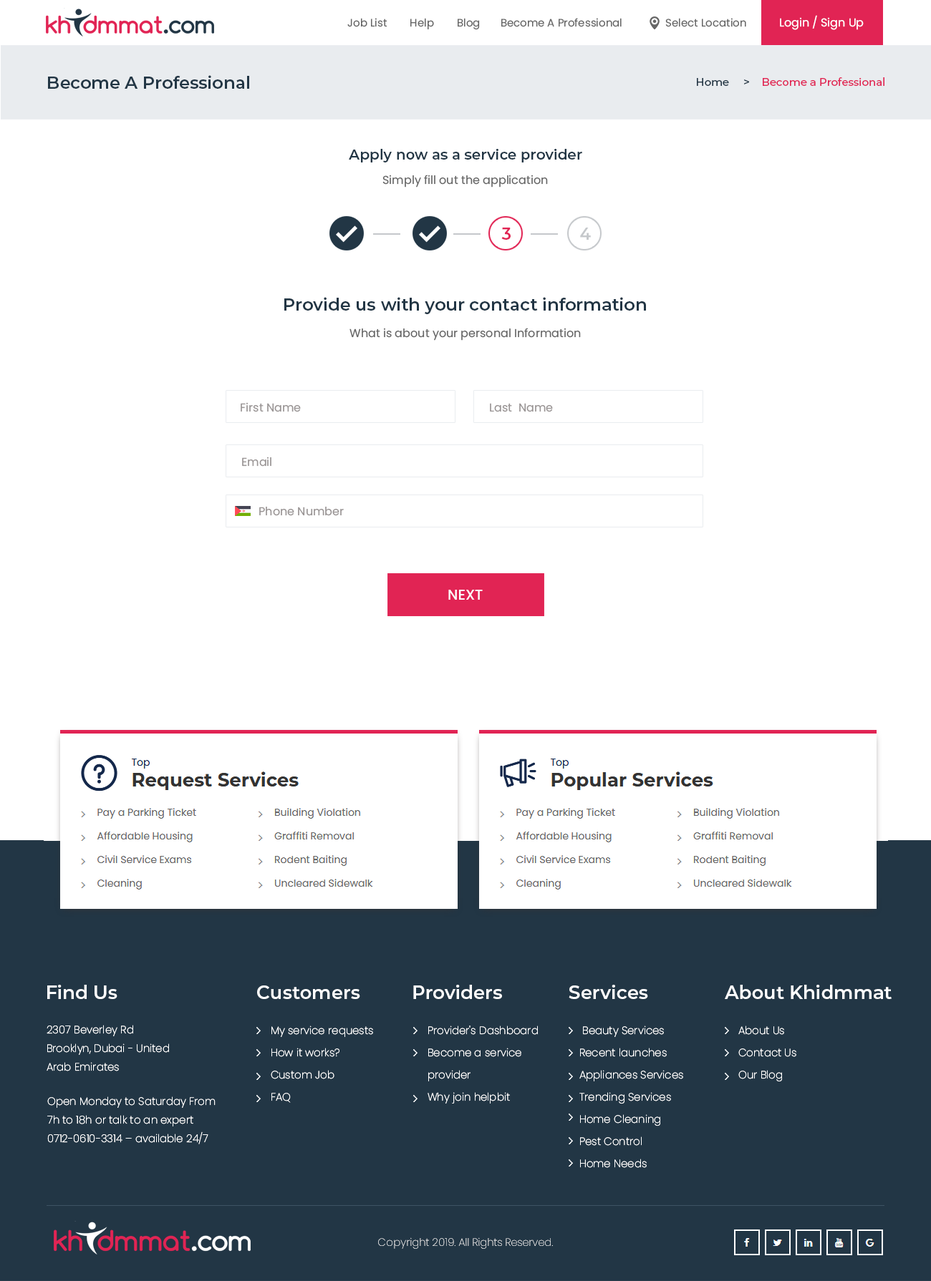
<style>
.page{position:relative;width:931px;height:1281px;background:#ffffff}
.page>*{position:absolute;margin:0}
.t1{font:10.7px "Poppins-Regular";color:#666666}
.t2{font:10px "Poppins-Regular";color:#666666}
.t3{font:11.5px "Poppins-Regular";color:#ffffff}
.t4{font:17.2px "Montserrat-SemiBold";color:#223645}
.t5{font:10.7px "Montserrat-Medium";color:#e12454}
.t6{font:10.7px "Montserrat-Medium";color:#05315e}
.t7{font:10.7px "Montserrat-Medium";color:#223645}
.t8{font:14.3px "Montserrat-SemiBold";color:#213544}
.t9{font:11.5px "Poppins-Regular";color:#666666}
.t10{font:16.5px "Montserrat-SemiBold";color:#e12454}
.t11{font:16.5px "Montserrat-SemiBold";color:#c5c8cb}
.t12{font:17.2px "Montserrat-SemiBold";color:#213544}
.t13{font:11.5px "Poppins-Regular";color:#9a9595}
.t14{font:14.3px "Poppins-Medium";color:#ffffff}
.t15{font:18.6px "Montserrat-SemiBold";color:#ffffff}
.t16{font:10.7px/18.6px "Poppins-ExtraLight";color:#ffffff}
.t17{font:10.7px/22.2px "Poppins-ExtraLight";color:#ffffff}
.t18{font:10.7px "Poppins-ExtraLight"}
</style>
<div class="page">
<p class="t1" style="left:347px;top:15px;width:516px;height:15px"><span class="t2">       </span> Job List        Help        Blog       Become A Professional               Select Location            <span class="t3">Login / Sign Up</span></p>
<p class="t4" style="left:48px;top:75px;width:201px;height:14px">Become A Professional</p>
<p class="t5" style="left:697px;top:77px;width:187px;height:9px"><span class="t6">    </span><span class="t7">Home     &gt;    </span>Become a Professional</p>
<p class="t8" style="left:349px;top:149px;width:233px;height:13px">Apply now as a service provider</p>
<p class="t9" style="left:382px;top:175px;width:166px;height:13px">Simply fill out the application</p>
<p class="t10" style="left:501px;top:228px;width:9px;height:12px">3</p>
<p class="t11" style="left:580px;top:228px;width:11px;height:12px">4</p>
<p class="t12" style="left:284px;top:297px;width:362px;height:17px">Provide us with your contact information</p>
<p class="t9" style="left:349px;top:328px;width:232px;height:13px">What is about your personal Information</p>
<p class="t13" style="left:241px;top:402px;width:60px;height:10px">First Name</p>
<p class="t13" style="left:490px;top:403px;width:63px;height:9px">Last  Name</p>
<p class="t13" style="left:242px;top:457px;width:29px;height:10px">Email</p>
<p class="t13" style="left:259px;top:507px;width:85px;height:9px">Phone Number</p>
<p class="t14" style="left:448px;top:590px;width:34px;height:10px">NEXT</p>
<p class="t15" style="left:47px;top:985px;width:70px;height:14px">Find Us</p>
<p class="t15" style="left:257px;top:986px;width:103px;height:13px">Customers</p>
<p class="t15" style="left:413px;top:985px;width:89px;height:14px">Providers</p>
<p class="t15" style="left:568px;top:985px;width:80px;height:14px">Services</p>
<p class="t15" style="left:724px;top:985px;width:167px;height:14px">About Khidmmat</p>
<p class="t16" style="left:47px;top:1025px;width:122px;height:47px">2307 Beverley Rd<br>Brooklyn, Dubai - United Arab Emirates</p>
<p class="t17" style="left:271px;top:1026px;width:102px;height:77px">My service requests<br>    How it works?<br>    Custom Job<br>    FAQ</p>
<p class="t17" style="left:427px;top:1026px;width:111px;height:78px">Provider's Dashboard<br>    Become a service <br>    provider<br>    Why join helpbit</p>
<p class="t17" style="left:579px;top:1026px;width:104px;height:142px">Beauty Services <br>Recent launches <br>Appliances Services Trending Services <br>Home Cleaning <br>Pest Control <br>Home Needs</p>
<p class="t17" style="left:738px;top:1026px;width:58px;height:56px">About Us<br> Contact Us<br> Our Blog</p>
<p class="t16" style="left:47px;top:1097px;width:168px;height:48px">Open Monday to Saturday From 7h to 18h or talk to an expert 0712-0610-3314 – available 24/7</p>
<p class="t18" style="left:378px;top:1238px;width:175px;height:11px">Copyright 2019. All Rights Reserved.</p>
</div>
